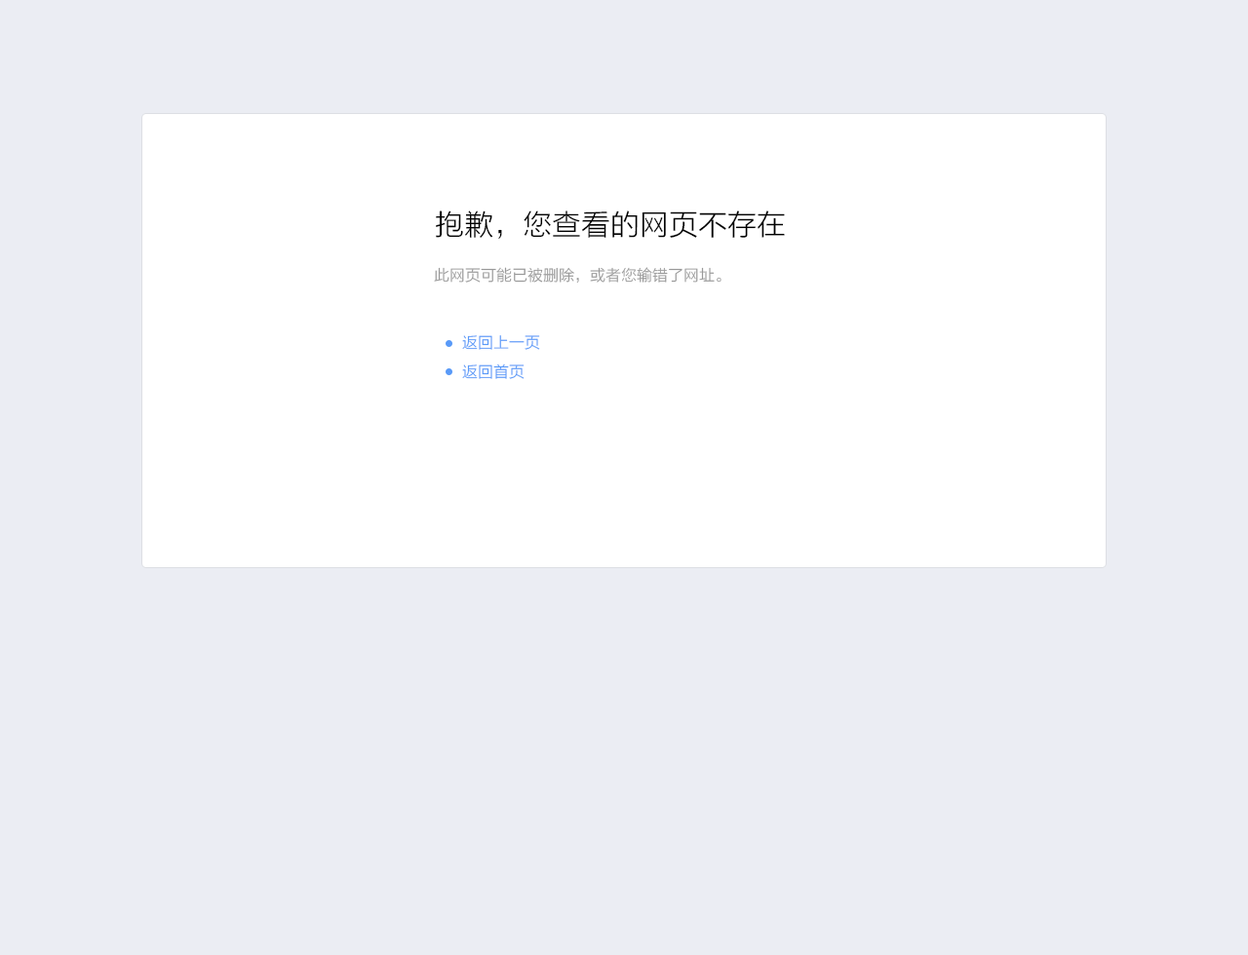
<style>
.page{position:relative;width:1248px;height:955px;background:#ebedf3}
.page>*{position:absolute;margin:0}
.t1{font:29.2px "FZLTXHK";color:#000000}
.t2{font:15.6px "FZLTXHK";color:#999999}
.t3{font:15.6px/29.2px "FZLTXHK";color:#599af8}
</style>
<div class="page">
<p class="t1" style="left:436px;top:211px;width:349px;height:28px">抱歉，您查看的网页不存在</p>
<p class="t2" style="left:434px;top:267px;width:287px;height:17px">此网页可能已被删除，或者您输错了网址。</p>
<p class="t3" style="left:462px;top:335px;width:78px;height:44px">返回上一页<br>返回首页</p>
</div>
